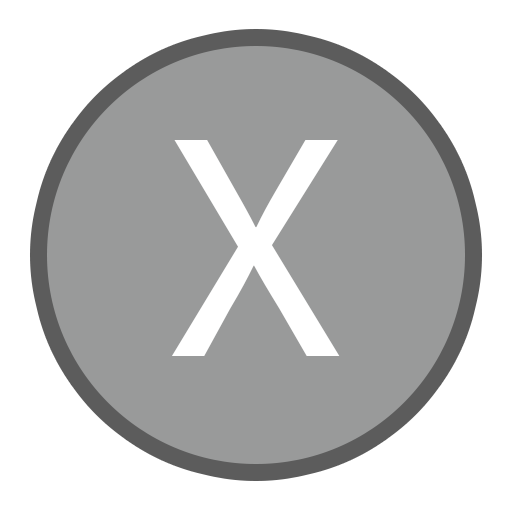
<style>
.page{position:relative;width:512px;height:512px;background:#999a9a}
.page>*{position:absolute;margin:0}
.t1{font:320.8px "MyriadPro-Regular";color:#ffffff}
</style>
<div class="page">
<p class="t1" style="left:172px;top:140px;width:168px;height:216px">X</p>
</div>
